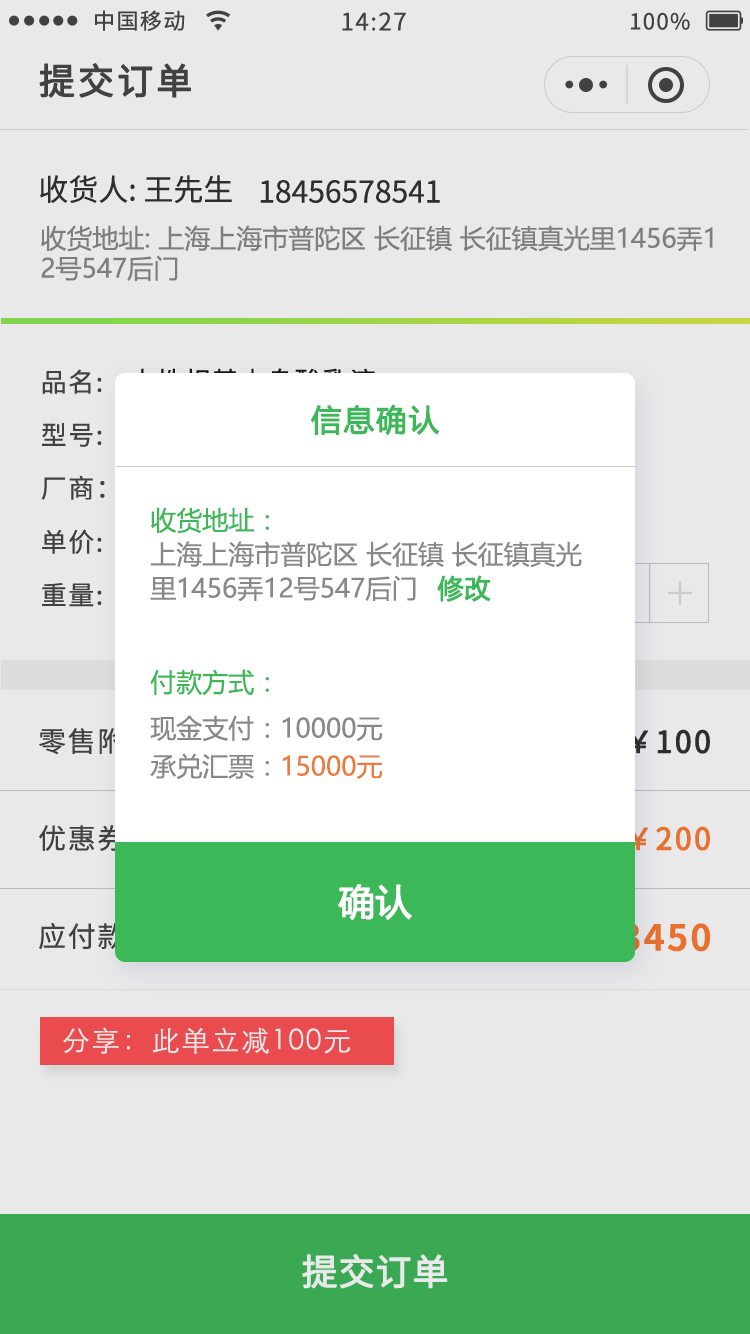
<style>
.page{position:relative;width:750px;height:1334px;background:#e9e9e9}
.page>*{position:absolute;margin:0}
.t1{font:22px "NotoSansCJKsc-Regular";letter-spacing:0.06em;color:#444444}
.t2{font:24px "NotoSansCJKsc-Regular";letter-spacing:0.06em;color:#444444}
.t3{font:36px "NotoSansCJKsc-Regular";letter-spacing:0.06em;color:#444444;font-weight:bold}
.t4{font:30px "NotoSansCJKsc-Regular";color:#302f2f}
.t5{font:26px/30px "MicrosoftYaHei";color:#888888}
.t6{font:26px "NotoSansCJKsc-Regular";letter-spacing:0.06em;color:#444444}
.t7{font:30px "MicrosoftYaHei";letter-spacing:0.06em;color:#3db858;font-weight:bold}
.t8{font:26px/34px "MicrosoftYaHei";color:#888888}
.t9{font:26px/34px "MicrosoftYaHei";color:#3db858}
.t10{font:26px "MicrosoftYaHei";color:#3db858;font-weight:bold}
.t11{font:26px "MicrosoftYaHei";color:#3db858}
.t12{font:26px "MicrosoftYaHei";color:#888888}
.t13{font:28px "NotoSansCJKsc-Regular";letter-spacing:0.06em}
.t14{font:30px "NotoSansCJKsc-Regular";letter-spacing:0.06em;color:#302f2f;font-weight:bold}
.t15{font:26px "MicrosoftYaHei";color:#e97b3f}
.t16{font:28px "NotoSansCJKsc-Regular";letter-spacing:0.06em;color:#444444}
.t17{font:30px "NotoSansCJKsc-Regular";letter-spacing:0.06em;color:#ff782f;font-weight:bold}
.t18{font:36px "MicrosoftYaHei";color:#ffffff;font-weight:bold}
.t19{font:36px "NotoSansCJKsc-Bold";letter-spacing:0.06em}
.t20{font:28px "STXihei";letter-spacing:0.06em;color:#ffffff}
.t21{font:36px "NotoSansCJKsc-Regular";color:#ffffff;font-weight:bold}
</style>
<div class="page">
<p class="t1" style="left:95px;top:10px;width:90px;height:21px">中国移动</p>
<p class="t2" style="left:342px;top:12px;width:64px;height:19px">14:27</p>
<p class="t1" style="left:631px;top:12px;width:59px;height:18px">100%</p>
<p class="t3" style="left:39px;top:63px;width:152px;height:35px">提交订单</p>
<p class="t4" style="left:40px;top:175px;width:192px;height:28px">收货人: 王先生</p>
<p class="t4" style="left:260px;top:180px;width:180px;height:23px">18456578541</p>
<p class="t5" style="left:41px;top:225px;width:672px;height:56px">收货地址: 上海上海市普陀区 长征镇 长征镇真光里1456弄1<br>2号547后门</p>
<p class="t6" style="left:42px;top:369px;width:60px;height:25px">品名:</p>
<p class="t7" style="left:311px;top:404px;width:128px;height:31px">信息确认</p>
<p class="t6" style="left:42px;top:423px;width:60px;height:24px">型号:</p>
<p class="t6" style="left:41px;top:475px;width:64px;height:25px">厂商：</p>
<p class="t8" style="left:150px;top:507px;width:432px;height:94px"><span class="t9">收货地址：<br></span>上海上海市普陀区 长征镇 长征镇真光<br>里1456弄12号547后门</p>
<p class="t6" style="left:42px;top:529px;width:60px;height:25px">单价:</p>
<p class="t10" style="left:437px;top:575px;width:54px;height:27px">修改</p>
<p class="t6" style="left:42px;top:583px;width:60px;height:24px">重量:</p>
<p class="t11" style="left:150px;top:669px;width:119px;height:27px">付款方式：</p>
<p class="t12" style="left:150px;top:715px;width:233px;height:27px">现金支付：10000元</p>
<p class="t13" style="left:39px;top:727px;width:246px;height:28px">零售附加（十吨免）</p>
<p class="t14" style="left:628px;top:729px;width:82px;height:25px">￥100</p>
<p class="t15" style="left:150px;top:753px;width:233px;height:26px"><span class="t12">承兑汇票：</span>15000元</p>
<p class="t16" style="left:39px;top:825px;width:86px;height:26px">优惠券</p>
<p class="t17" style="left:611px;top:826px;width:99px;height:25px">-￥200</p>
<p class="t18" style="left:338px;top:884px;width:74px;height:36px">确认</p>
<p class="t16" style="left:39px;top:923px;width:86px;height:27px">应付款</p>
<p class="t19" style="left:587px;top:923px;width:123px;height:29px">￥3450</p>
<p class="t20" style="left:63px;top:1027px;width:288px;height:27px">分享：此单立减100元</p>
<p class="t21" style="left:302px;top:1253px;width:146px;height:36px">提交订单</p>
</div>
